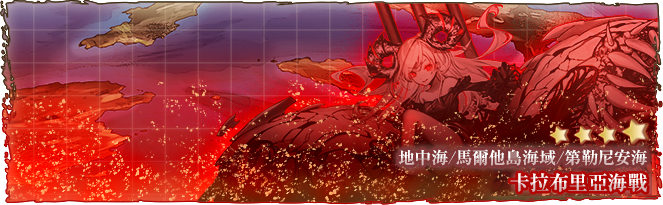
<style>
.page{position:relative;width:663px;height:205px}
.page>*{position:absolute;margin:0}
.t1{font:17px "RyuminPro-ExBold"}
.t2{font:20px "RyuminPro-ExBold"}
</style>
<div class="page">
<p class="t1" style="left:398px;top:149px;width:249px;height:17px">地中海/馬爾他島海域/第勒尼安海</p>
<p class="t2" style="left:510px;top:173px;width:137px;height:19px">卡拉布里亞海戰</p>
</div>
